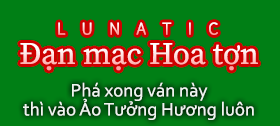
<style>
.page{position:relative;width:280px;height:126px;background:#007f15}
.page>*{position:absolute;margin:0}
.t1{font:31px "SourceSerifRoman-Regular"}
.t2{font:19px/19px "Corbel";color:#ffffff}
</style>
<div class="page">
<p class="t1" style="left:20px;top:43px;width:238px;height:28px">Đạn mạc Hoa tợn</p>
<p class="t2" style="left:23px;top:82px;width:231px;height:38px;text-align:center;opacity:0.9">Phá xong ván này<br>thì vào Ảo Tưởng Hương luôn</p>
</div>
